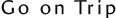
<style>
.page{position:relative;width:116px;height:18px;background:#ffffff}
.page>*{position:absolute;margin:0}
.t1{font:20px "Amira-Roman";letter-spacing:0.15em;color:#000000}
</style>
<div class="page">
<p class="t1" style="left:1px;top:0px;width:115px;height:19px;opacity:0.96">Go on Trip</p>
</div>
